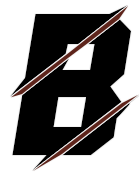
<style>
.page{position:relative;width:139px;height:177px;background:#ffffff}
.page>*{position:absolute;margin:0}
.t1{font:201.2px "MX-Regular";color:#000000;scale:0.85 1}
</style>
<div class="page">
<p class="t1" style="left:10px;top:5px;width:130px;height:166px">B</p>
</div>
